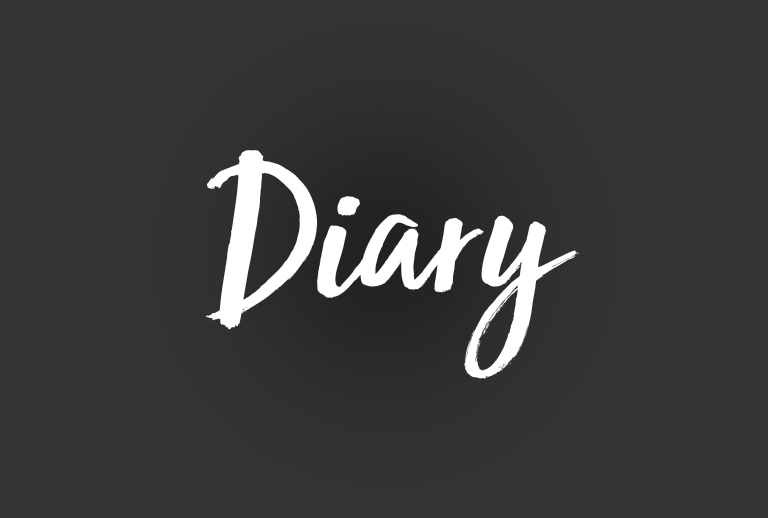
<style>
.page{position:relative;width:768px;height:518px;background:#333333}
.page>*{position:absolute;margin:0}
.t1{font:206.1px "SunValley";color:#ffffff}
</style>
<div class="page">
<p class="t1" style="left:205px;top:150px;width:375px;height:229px">Diary</p>
</div>
